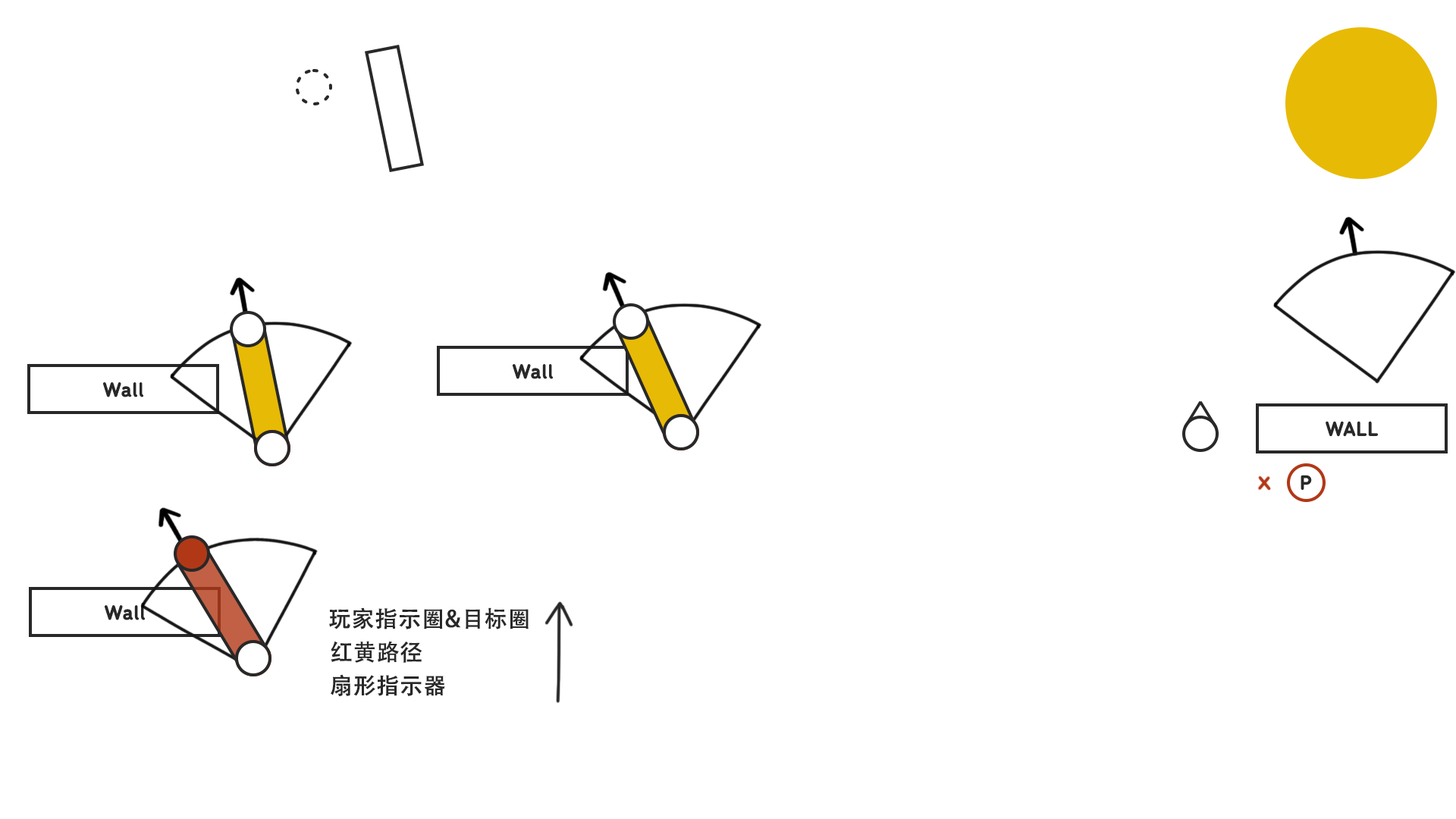
<style>
.page{position:relative;width:1456px;height:819px;background:#ffffff}
.page>*{position:absolute;margin:0}
.t1{font:21.2px "Menco-Bold";color:#282828;font-weight:bold}
.t2{font:22.7px "AdobeHeitiStd-Regular";color:#282828;font-weight:bold}
</style>
<div class="page">
<p class="t1" style="left:1326px;top:421px;width:52px;height:16px">WALL</p>
<p class="t2" style="left:329px;top:607px;width:200px;height:22px">玩家指示圈&amp;目标圈</p>
<p class="t2" style="left:331px;top:641px;width:91px;height:22px">红黄路径</p>
<p class="t2" style="left:331px;top:674px;width:114px;height:22px">扇形指示器</p>
</div>
